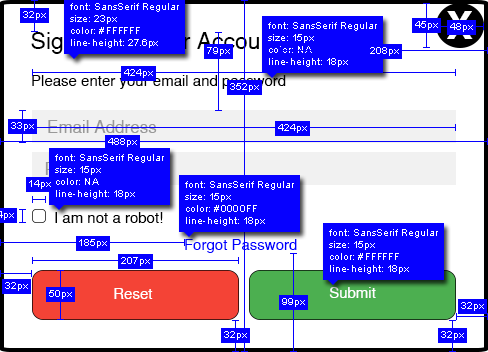
<style>
.page{position:relative;width:488px;height:352px;background:#ffffff}
.page>*{position:absolute;margin:0}
.t1{font:10px "ArialMT";color:#ffffff}
.t2{font:37.8px "SansSerifBold";scale:1.07 1}
.t3{font:23px "SansSerif"}
.t4{font:15px "SansSerif";color:#000000}
.t5{font:17px "SansSerif";color:#999999}
.t6{font:15px "SansSerif";color:#0000ff}
.t7{font:15px "SansSerif";color:#ffffff}
</style>
<div class="page">
<p class="t1" style="left:70px;top:3px;width:109px;height:45px">font: SansSerif Regular<br>size: 23px<br>color: #FFFFFF<br>line-height: 27.6px</p>
<p class="t1" style="left:23px;top:11px;width:23px;height:9px">32px</p>
<p class="t2" style="left:447px;top:11px;width:26px;height:28px">X</p>
<p class="t1" style="left:268px;top:22px;width:109px;height:45px">font: SansSerif Regular<br>size: 15px<br>color: NA<br>line-height: 18px</p>
<p class="t1" style="left:415px;top:21px;width:23px;height:9px">45px</p>
<p class="t1" style="left:450px;top:23px;width:23px;height:9px">48px</p>
<p class="t3" style="left:31px;top:32px;width:249px;height:22px">Sign In To Your Account</p>
<p class="t1" style="left:207px;top:47px;width:23px;height:9px">79px</p>
<p class="t1" style="left:370px;top:47px;width:29px;height:9px">208px</p>
<p class="t4" style="left:32px;top:75px;width:254px;height:14px">Please enter your email and password</p>
<p class="t1" style="left:124px;top:69px;width:29px;height:9px">424px</p>
<p class="t1" style="left:230px;top:83px;width:29px;height:9px">352px</p>
<p class="t1" style="left:11px;top:122px;width:23px;height:9px">33px</p>
<p class="t5" style="left:48px;top:120px;width:109px;height:13px">Email Address</p>
<p class="t1" style="left:278px;top:124px;width:29px;height:9px">424px</p>
<p class="t1" style="left:108px;top:138px;width:29px;height:9px">488px</p>
<p class="t1" style="left:55px;top:154px;width:109px;height:45px">font: SansSerif Regular<br>size: 15px<br>color: NA<br>line-height: 18px</p>
<p class="t1" style="left:29px;top:180px;width:22px;height:9px">14px</p>
<p class="t1" style="left:185px;top:181px;width:109px;height:45px">font: SansSerif Regular<br>size: 15px<br>color: #0000FF<br>line-height: 18px</p>
<p class="t4" style="left:55px;top:212px;width:108px;height:11px">I am not a robot!</p>
<p class="t1" style="left:329px;top:229px;width:109px;height:45px">font: SansSerif Regular<br>size: 15px<br>color: #FFFFFF<br>line-height: 18px</p>
<p class="t1" style="left:79px;top:239px;width:28px;height:9px">185px</p>
<p class="t6" style="left:185px;top:239px;width:112px;height:14px">Forgot Password</p>
<p class="t1" style="left:121px;top:257px;width:29px;height:9px">207px</p>
<p class="t1" style="left:5px;top:282px;width:23px;height:9px">32px</p>
<p class="t1" style="left:49px;top:290px;width:23px;height:9px">50px</p>
<p class="t7" style="left:114px;top:288px;width:39px;height:11px">Reset</p>
<p class="t7" style="left:329px;top:287px;width:47px;height:11px">Submit</p>
<p class="t1" style="left:282px;top:298px;width:23px;height:9px">99px</p>
<p class="t1" style="left:461px;top:302px;width:23px;height:9px">32px</p>
<p class="t1" style="left:224px;top:331px;width:23px;height:9px">32px</p>
<p class="t1" style="left:441px;top:331px;width:23px;height:9px">32px</p>
</div>
